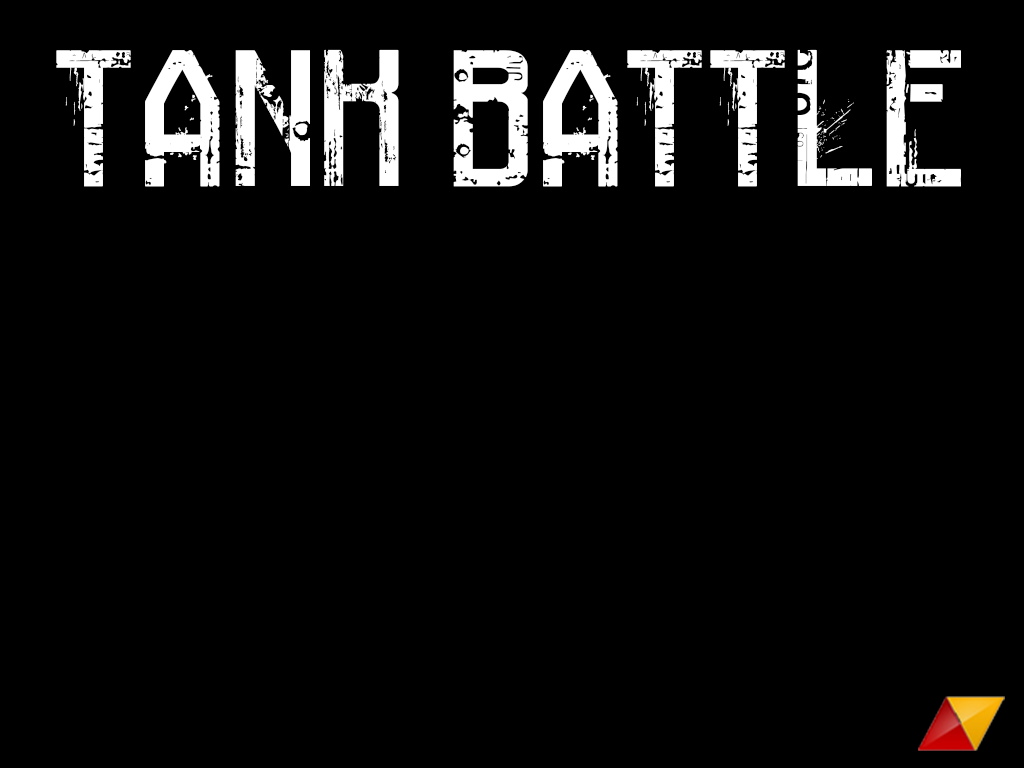
<style>
.page{position:relative;width:1024px;height:768px;background:#000000}
.page>*{position:absolute;margin:0}
.t1{font:101px "RailwayToHells";color:#ffffff}
</style>
<div class="page">
<p class="t1" style="left:56px;top:49px;width:905px;height:138px">TANK BATTLE</p>
</div>
